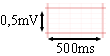
<style>
.page{position:relative;width:110px;height:56px;background:#ffffff}
.page>*{position:absolute;margin:0}
.t1{font:14px "TimesNewRomanPSMT";letter-spacing:0.01em;color:#000000}
</style>
<div class="page">
<p class="t1" style="left:1px;top:15px;width:37px;height:12px">0,5mV</p>
<p class="t1" style="left:57px;top:43px;width:37px;height:10px">500ms</p>
</div>
